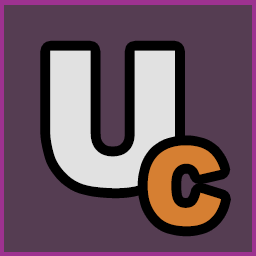
<style>
.page{position:relative;width:256px;height:256px;background:#553d52}
.page>*{position:absolute;margin:0}
.t1{font:188.5px "Arial-Black";color:#e1e1e1;scale:0.96 1}
.t2{font:108.9px "Arial-Black";color:#d67f32;scale:0.96 1}
</style>
<div class="page">
<p class="t1" style="left:50px;top:50px;width:125px;height:139px">U</p>
<p class="t2" style="left:147px;top:145px;width:74px;height:82px">C</p>
</div>
